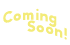
<style>
.page{position:relative;width:70px;height:45px;background:#ffffff}
.page>*{position:absolute;margin:0}
.t1{font:15px "Avenir-Black";color:#f3eb79}
</style>
<div class="page">
<p class="t1" style="left:3px;top:8px;width:64px;height:32px;text-align:center">Coming<br><br> Soon!</p>
</div>
